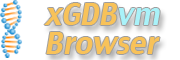
<style>
.page{position:relative;width:180px;height:60px;background:#ffffff}
.page>*{position:absolute;margin:0}
.t1{font:28.8px/28.8px "CharcoalCY";color:#f8c259;font-style:italic;scale:0.96 1}
.t2{font:28.8px/28.8px "CharcoalCY";color:#a9f2f9;font-style:italic;scale:0.96 1}
</style>
<div class="page">
<p class="t1" style="left:44px;top:3px;width:116px;height:51px">xGDB<span class="t2">vm<br></span>Browser</p>
</div>
